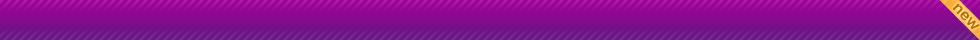
<style>
.page{position:relative;width:980px;height:40px}
.page>*{position:absolute;margin:0}
.t1{font:16px "ArialRoundedMTBold";color:#ba6b00}
</style>
<div class="page">
<p class="t1" style="left:953px;top:3px;width:27px;height:26px;rotate:46deg">new</p>
</div>
